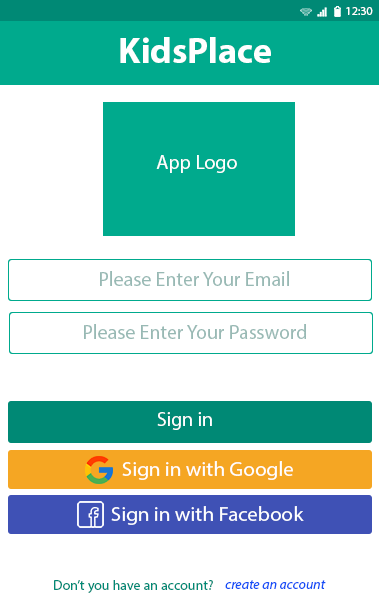
<style>
.page{position:relative;width:379px;height:612px;background:#ffffff}
.page>*{position:absolute;margin:0}
.t1{font:12px "MyriadPro-Regular";color:#ffffff}
.t2{font:36px "MyriadPro-Bold";color:#ffffff}
.t3{font:20px "MyriadPro-Regular";color:#ffffff}
.t4{font:20px "MyriadPro-Regular";color:#98b9b4}
.t5{font:20px "MyriadPro-Regular";color:#ffffff;scale:1.05 1}
.t6{font:14px "MyriadPro-Regular";color:#008975}
.t7{font:14px "MyriadPro-It";color:#134ef6}
</style>
<div class="page">
<p class="t1" style="left:346px;top:7px;width:27px;height:8px">12:30</p>
<p class="t2" style="left:120px;top:37px;width:151px;height:26px">KidsPlace</p>
<p class="t3" style="left:156px;top:155px;width:81px;height:18px">App Logo</p>
<p class="t4" style="left:100px;top:271px;width:189px;height:15px">Please Enter Your Email</p>
<p class="t4" style="left:84px;top:324px;width:222px;height:15px">Please Enter Your Password</p>
<p class="t3" style="left:157px;top:412px;width:55px;height:18px">Sign in</p>
<p class="t5" style="left:122px;top:461px;width:171px;height:19px">Sign in with Google</p>
<p class="t5" style="left:111px;top:506px;width:193px;height:19px">Sign in with Facebook</p>
<p class="t6" style="left:54px;top:580px;width:159px;height:13px">Don’t you have an account?</p>
<p class="t7" style="left:225px;top:580px;width:101px;height:9px">create an account</p>
</div>
